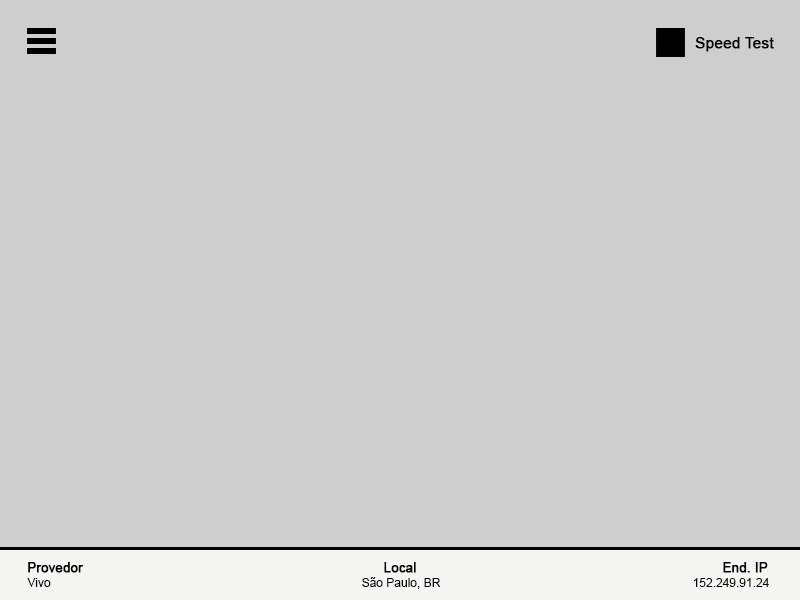
<style>
.page{position:relative;width:800px;height:600px;background:#cecece}
.page>*{position:absolute;margin:0}
.t1{font:15px "ArialMT";color:#000000;font-weight:bold}
.t2{font:13px "ArialMT";color:#000000;font-weight:bold}
.t3{font:12px "ArialMT";color:#000000}
</style>
<div class="page">
<p class="t1" style="left:695px;top:37px;width:79px;height:15px">Speed Test</p>
<p class="t2" style="left:28px;top:562px;width:55px;height:11px">Provedor</p>
<p class="t2" style="left:384px;top:562px;width:32px;height:11px">Local</p>
<p class="t2" style="left:723px;top:562px;width:45px;height:11px">End. IP</p>
<p class="t3" style="left:27px;top:578px;width:24px;height:9px">Vivo</p>
<p class="t3" style="left:362px;top:577px;width:79px;height:12px">São Paulo, BR</p>
<p class="t3" style="left:693px;top:578px;width:76px;height:9px">152.249.91.24</p>
</div>
